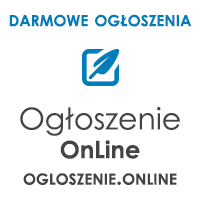
<style>
.page{position:relative;width:200px;height:200px;background:#ffffff}
.page>*{position:absolute;margin:0}
.t1{font:22px "CenturyGothic-Bold";color:#017eba;font-variant:small-caps}
.t2{font:22px "CenturyGothic-Bold";color:#444444;font-variant:small-caps}
.t3{font:30px/24px "CenturyGothic";color:#444444}
.t4{font:24px "CenturyGothic-Bold";color:#444444}
</style>
<div class="page">
<p class="t1" style="left:9px;top:14px;width:183px;height:13px">darmowe ogłoszenia</p>
<p class="t2" style="left:20px;top:106px;width:160px;height:79px;text-align:center"><span class="t3">Ogłoszenie<br></span><span class="t4">OnLine<br></span>ogloszenie.online</p>
</div>
